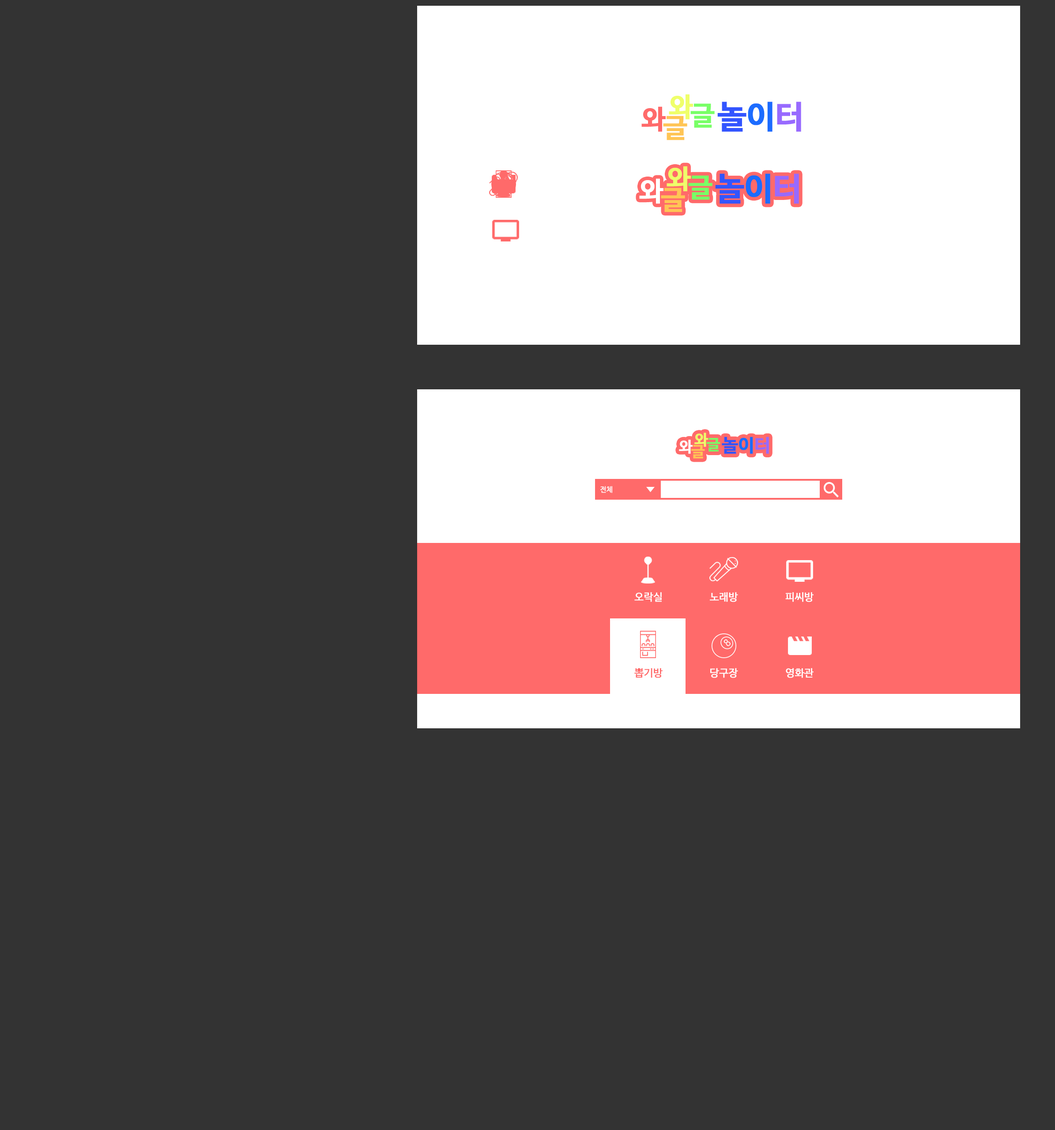
<style>
.page{position:relative;width:1055px;height:1130px;background:#333333}
.page>*{position:absolute;margin:0}
.t1{font:26.5px "NanumBarunGothicBold";letter-spacing:-0.01em;color:#efff6a;font-weight:bold}
.t2{font:31.8px "NanumBarunGothicBold";letter-spacing:-0.01em;color:#3355ff;font-weight:bold}
.t3{font:31.8px "NanumBarunGothicBold";letter-spacing:-0.01em;color:#1c6cff;font-weight:bold}
.t4{font:31.8px "NanumBarunGothicBold";letter-spacing:-0.01em;color:#986aff;font-weight:bold}
.t5{font:26.5px "NanumBarunGothicBold";letter-spacing:-0.01em;color:#ff6a6a;font-weight:bold}
.t6{font:26.5px "NanumBarunGothicBold";letter-spacing:-0.01em;color:#78ff66;font-weight:bold}
.t7{font:26.5px "NanumBarunGothicBold";letter-spacing:-0.01em;color:#ffc555;font-weight:bold}
.t8{font:7.1px "NanumBarunGothic";letter-spacing:-0.01em;color:#ffffff;font-weight:bold}
.t9{font:10.3px "NanumBarunGothic";color:#ffffff;font-weight:bold}
.t10{font:10.3px "NanumBarunGothic";color:#ff6a6a;font-weight:bold}
</style>
<div class="page">
<p class="t1" style="left:669px;top:94px;width:24px;height:26px">와</p>
<p class="t2" style="left:717px;top:102px;width:84px;height:30px">놀<span class="t3">이</span><span class="t4">터</span></p>
<p class="t5" style="left:641px;top:106px;width:25px;height:26px">와</p>
<p class="t6" style="left:690px;top:103px;width:25px;height:25px">글</p>
<p class="t7" style="left:663px;top:116px;width:24px;height:24px">글</p>
<p class="t8" style="left:600px;top:486px;width:12px;height:7px">전체</p>
<p class="t9" style="left:634px;top:592px;width:28px;height:10px">오락실</p>
<p class="t9" style="left:710px;top:592px;width:28px;height:10px">노래방</p>
<p class="t9" style="left:785px;top:592px;width:29px;height:10px">피씨방</p>
<p class="t10" style="left:634px;top:668px;width:29px;height:10px">뽑기방</p>
<p class="t9" style="left:710px;top:668px;width:28px;height:10px">당구장</p>
<p class="t9" style="left:786px;top:668px;width:28px;height:10px">영화관</p>
</div>
